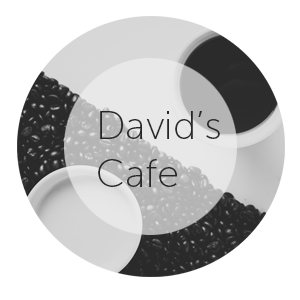
<style>
.page{position:relative;width:300px;height:300px;background:#ffffff}
.page>*{position:absolute;margin:0}
.t1{font:40px "MuseoSans-100";color:#272727}
</style>
<div class="page">
<p class="t1" style="left:98px;top:111px;width:122px;height:76px">David’s<br>Cafe</p>
</div>
